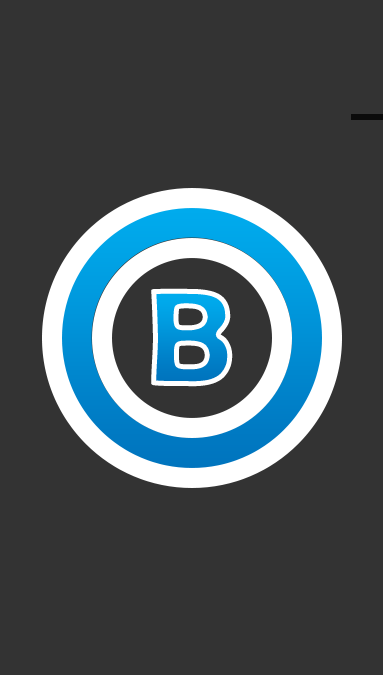
<style>
.page{position:relative;width:383px;height:675px;background:#333333}
.page>*{position:absolute;margin:0}
.t1{font:140px "BerlinSansFBDemi-Bold";letter-spacing:0.2em}
</style>
<div class="page">
<p class="t1" style="left:151px;top:288px;width:82px;height:99px">B</p>
</div>
